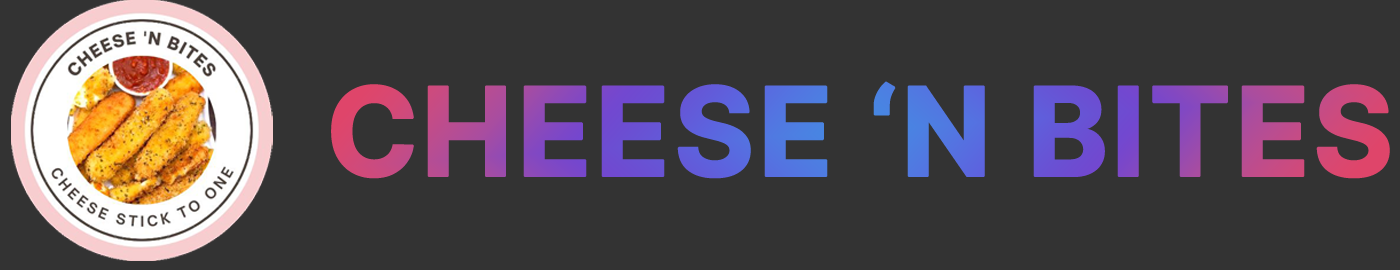
<style>
.page{position:relative;width:1400px;height:270px;background:#333333}
.page>*{position:absolute;margin:0}
.t1{font:123px "Inter-Bold";font-weight:bold}
</style>
<div class="page">
<p class="t1" style="left:331px;top:81px;width:1059px;height:98px">CHEESE ‘N BITES</p>
</div>
